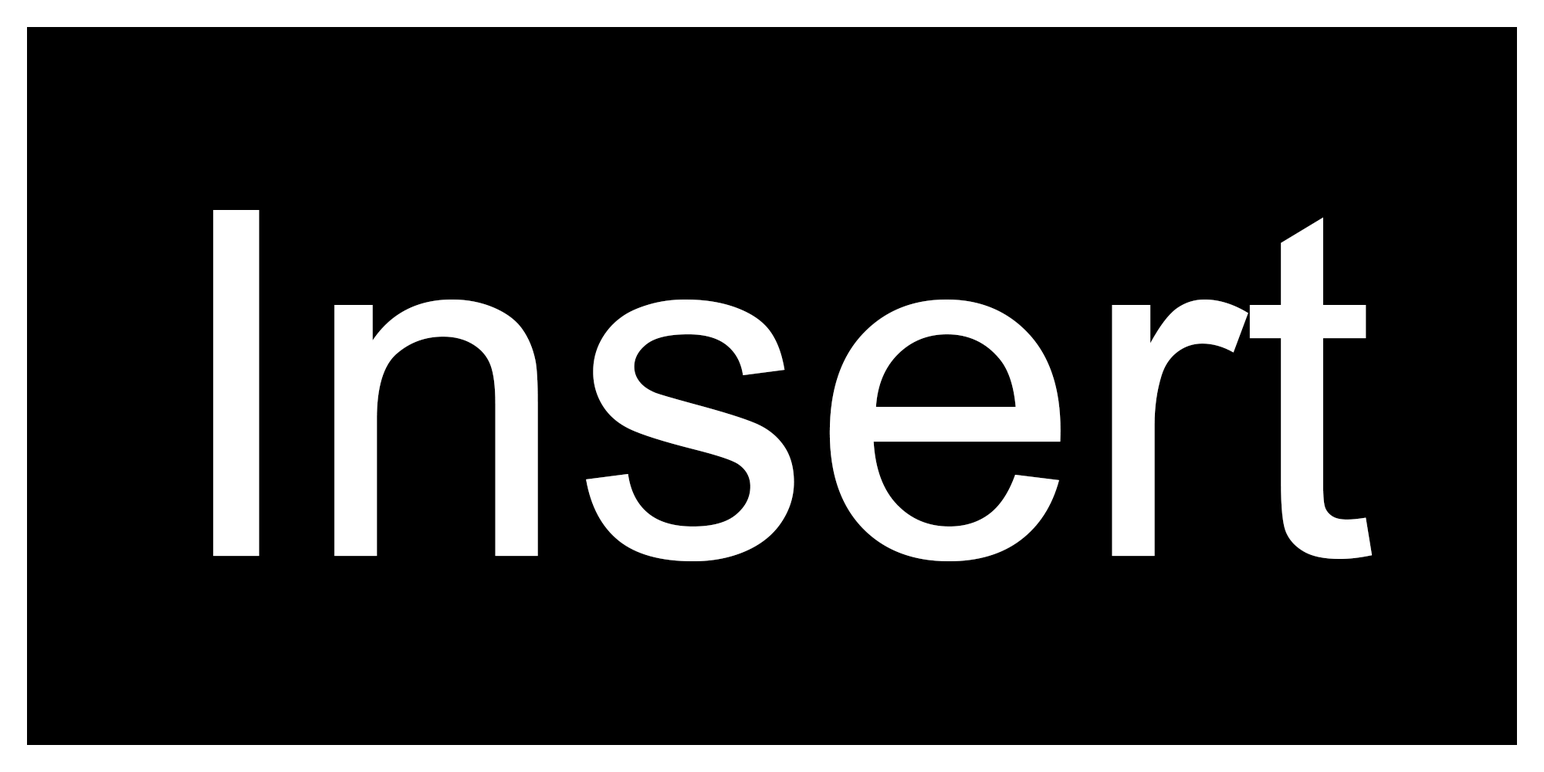
<style>
.page{position:relative;width:1544px;height:772px;background:#000000}
.page>*{position:absolute;margin:0}
.t1{font:482.6px "ArialMT";color:#ffffff}
</style>
<div class="page">
<p class="t1" style="left:213px;top:210px;width:1160px;height:351px">Insert</p>
</div>
